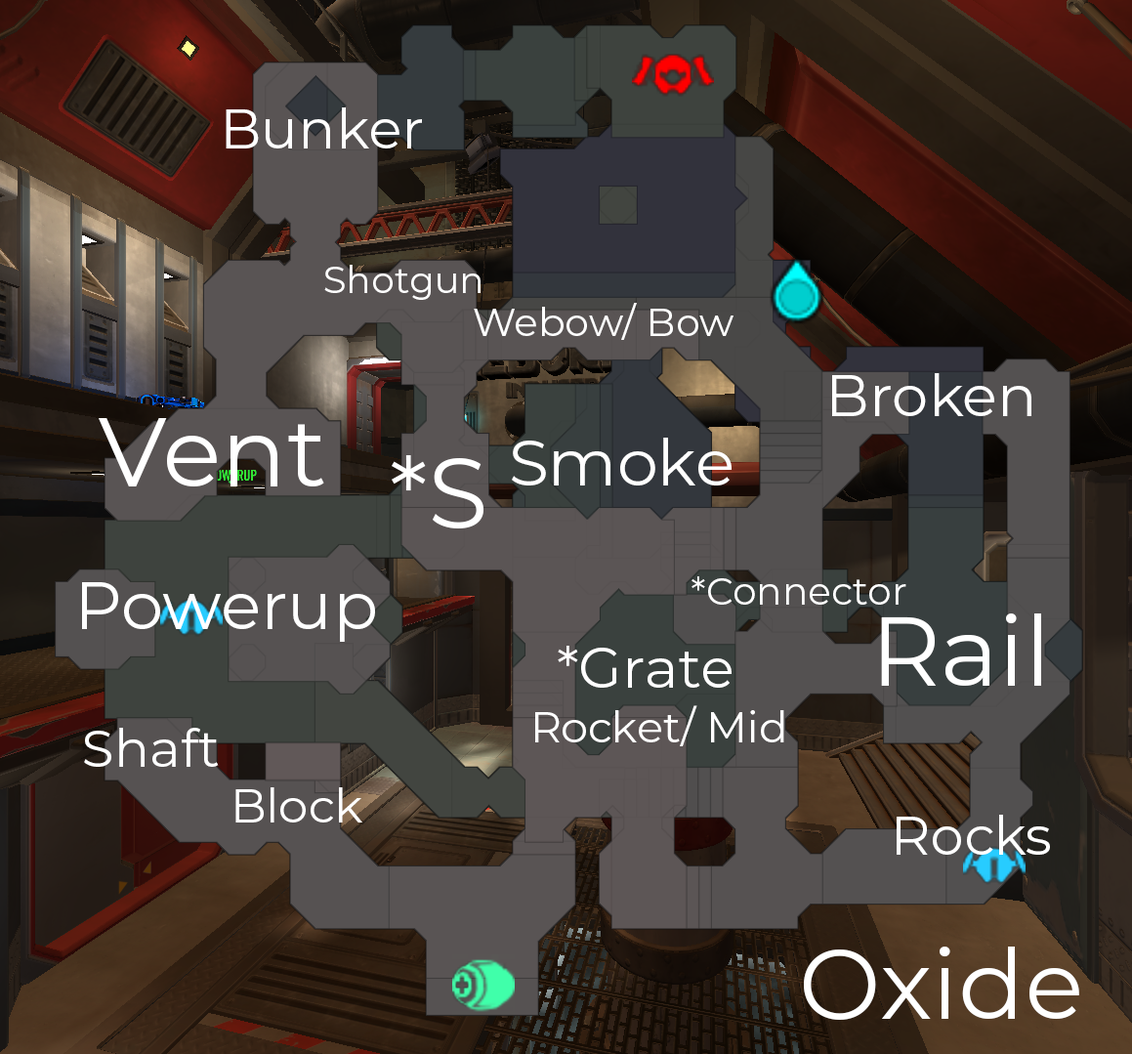
<style>
.page{position:relative;width:1132px;height:1054px}
.page>*{position:absolute;margin:0}
.t1{font:55.2px "Montserrat-Regular";color:#ffffff}
.t2{font:37px "Montserrat-Regular";color:#ffffff}
.t3{font:39.4px "Montserrat-Regular";color:#ffffff}
.t4{font:58.2px "Montserrat-Regular";color:#ffffff}
.t5{font:97.6px "Montserrat-Regular";color:#ffffff}
.t6{font:64.6px "Montserrat-Regular";color:#ffffff}
.t7{font:66.9px "Montserrat-Regular";color:#ffffff}
.t8{font:38.2px "Montserrat-Regular";color:#ffffff}
.t9{font:56.7px "Montserrat-Regular";color:#ffffff}
.t10{font:43px "Montserrat-Regular";color:#ffffff}
.t11{font:52.3px "Montserrat-Regular";color:#ffffff}
.t12{font:47.3px "Montserrat-Regular";color:#ffffff}
.t13{font:54.1px "Montserrat-Regular";color:#ffffff}
</style>
<div class="page">
<p class="t1" style="left:226px;top:107px;width:196px;height:41px">Bunker</p>
<p class="t2" style="left:324px;top:265px;width:156px;height:35px">Shotgun</p>
<p class="t3" style="left:474px;top:303px;width:259px;height:37px">Webow/ Bow</p>
<p class="t4" style="left:832px;top:373px;width:199px;height:43px">Broken</p>
<p class="t5" style="left:99px;top:418px;width:225px;height:68px">Vent</p>
<p class="t6" style="left:512px;top:437px;width:219px;height:48px">Smoke</p>
<p class="t5" style="left:392px;top:455px;width:91px;height:73px">*S</p>
<p class="t7" style="left:82px;top:582px;width:293px;height:60px">Powerup</p>
<p class="t8" style="left:691px;top:576px;width:215px;height:28px">*Connector</p>
<p class="t5" style="left:881px;top:613px;width:160px;height:72px">Rail</p>
<p class="t9" style="left:558px;top:645px;width:173px;height:42px">*Grate</p>
<p class="t10" style="left:535px;top:705px;width:249px;height:41px">Rocket/ Mid</p>
<p class="t11" style="left:84px;top:727px;width:135px;height:40px">Shaft</p>
<p class="t12" style="left:235px;top:787px;width:127px;height:35px">Block</p>
<p class="t13" style="left:896px;top:814px;width:154px;height:40px">Rocks</p>
<p class="t5" style="left:804px;top:946px;width:275px;height:73px">Oxide</p>
</div>
